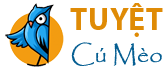
<style>
.page{position:relative;width:166px;height:69px;background:#ffffff}
.page>*{position:absolute;margin:0}
.t1{font:32px "MyriadPro-Bold";color:#df8b06}
.t2{font:24px "Papyrus-Regular";color:#055e92}
</style>
<div class="page">
<p class="t1" style="left:70px;top:3px;width:93px;height:34px">TUYỆT</p>
<p class="t2" style="left:71px;top:42px;width:91px;height:24px">Cú Mèo</p>
</div>
